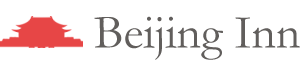
<style>
.page{position:relative;width:300px;height:65px;background:#ffffff}
.page>*{position:absolute;margin:0}
.t1{font:48px "Garamond";color:#615e5c}
</style>
<div class="page">
<p class="t1" style="left:94px;top:16px;width:206px;height:44px">Beijing Inn</p>
</div>
